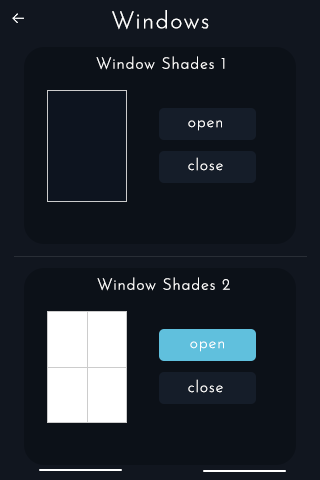
<style>
.page{position:relative;width:320px;height:480px;background:#0c1118}
.page>*{position:absolute;margin:0}
.t1{font:24px "JosefinSans-Light";letter-spacing:0.05em;color:#ffffff}
.t2{font:16px "JosefinSans-Light";letter-spacing:0.05em;color:#ffffff}
</style>
<div class="page">
<p class="t1" style="left:112px;top:10px;width:97px;height:20px">Windows</p>
<p class="t2" style="left:96px;top:56px;width:129px;height:14px">Window Shades 1</p>
<p class="t2" style="left:188px;top:120px;width:34px;height:11px">open</p>
<p class="t2" style="left:188px;top:157px;width:35px;height:14px">close</p>
<p class="t2" style="left:97px;top:277px;width:133px;height:14px">Window Shades 2</p>
<p class="t2" style="left:190px;top:341px;width:34px;height:11px">open</p>
<p class="t2" style="left:188px;top:379px;width:35px;height:14px">close</p>
</div>
